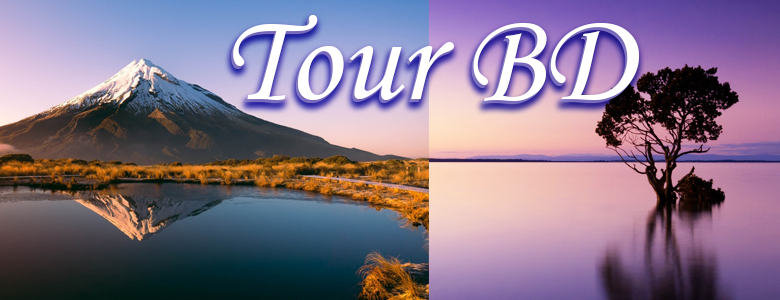
<style>
.page{position:relative;width:780px;height:300px}
.page>*{position:absolute;margin:0}
.t1{font:129px "MonotypeCorsiva";color:#ffffff}
</style>
<div class="page">
<p class="t1" style="left:233px;top:15px;width:407px;height:86px">Tour BD</p>
<p class="t1" style="left:231px;top:18px;width:407px;height:86px">Tour BD</p>
</div>
